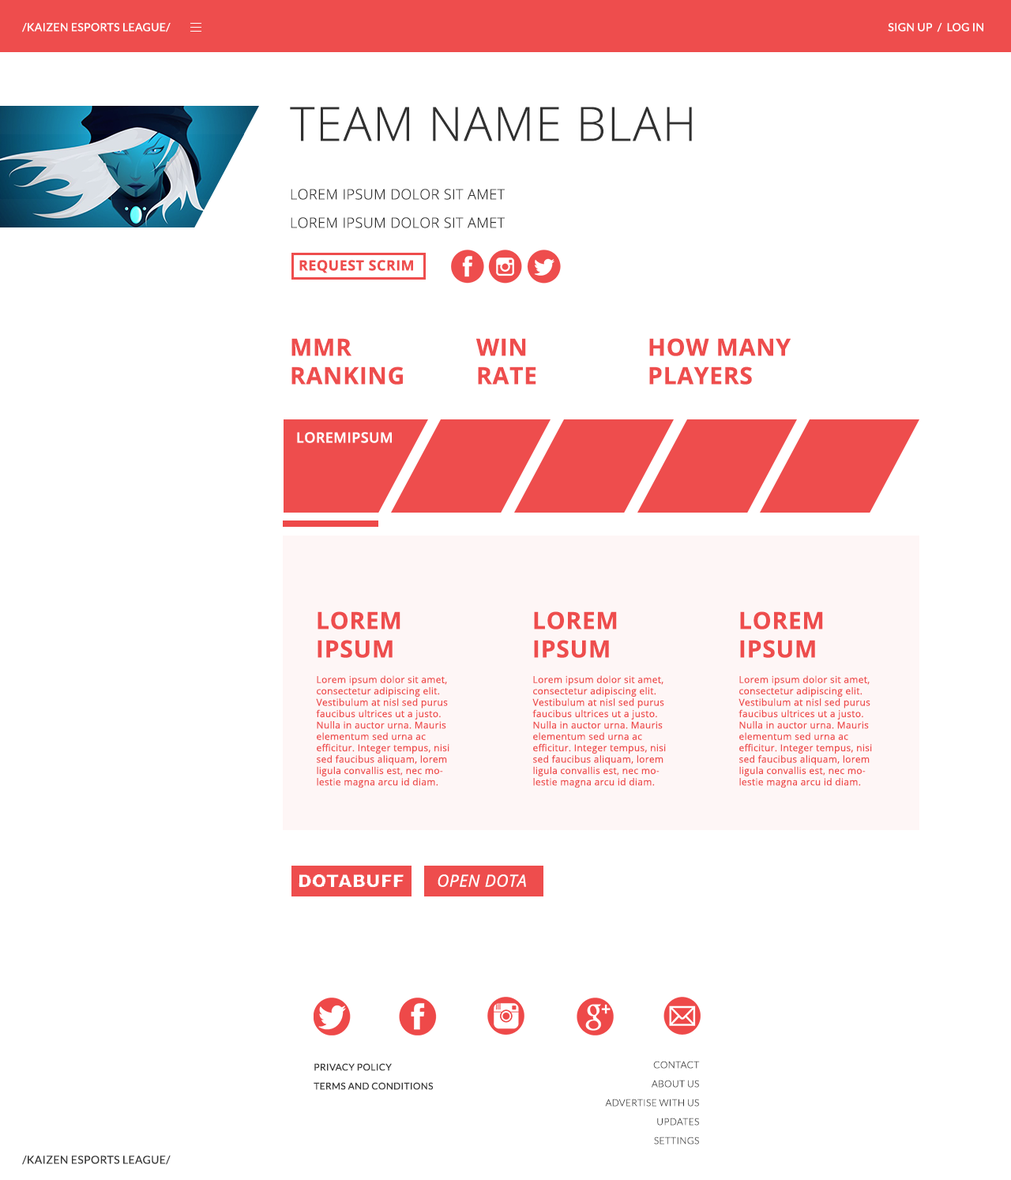
<style>
.page{position:relative;width:1011px;height:1180px;background:#ffffff}
.page>*{position:absolute;margin:0}
.t1{font:11.1px "Lato-Regular";letter-spacing:0.025em;color:#ffffff;text-transform:uppercase}
.t2{font:47.4px "OpenSans-Light";letter-spacing:0.025em;color:#303030}
.t3{font:14.2px "OpenSans-Light";letter-spacing:0.025em;color:#303030}
.t4{font:14.2px "OpenSans-Bold";letter-spacing:0.025em;color:#ee4d4d}
.t5{font:23.7px "OpenSans-Bold";letter-spacing:0.025em;color:#ee4d4d}
.t6{font:14.2px "OpenSans-Semibold";letter-spacing:0.025em;color:#ffffff}
.t7{font:9.5px "OpenSans";letter-spacing:0.025em;color:#ee4d4d}
.t8{font:16.6px "OpenSans-Italic";letter-spacing:0.025em;color:#ffffff}
.t9{font:9.5px/19px "Lato-Light";letter-spacing:0.025em;color:#383838;text-transform:uppercase}
.t10{font:9.5px/19px "Lato-Regular";letter-spacing:0.025em;color:#383838;text-transform:uppercase}
.t11{font:11.1px "Lato-Regular";letter-spacing:0.025em;color:#383838;text-transform:uppercase}
</style>
<div class="page">
<p class="t1" style="left:22px;top:23px;width:149px;height:9px">/KAIZEN ESPORTS LEAGUE/</p>
<p class="t1" style="left:888px;top:23px;width:95px;height:9px">SIGN UP  /  LOG IN</p>
<p class="t2" style="left:290px;top:107px;width:402px;height:34px">TEAM NAME BLAH</p>
<p class="t3" style="left:291px;top:189px;width:214px;height:11px">LOREM IPSUM DOLOR SIT AMET</p>
<p class="t3" style="left:291px;top:217px;width:214px;height:11px">LOREM IPSUM DOLOR SIT AMET</p>
<p class="t4" style="left:299px;top:260px;width:114px;height:13px">REQUEST SCRIM</p>
<p class="t5" style="left:291px;top:338px;width:112px;height:47px">MMR<br>RANKING</p>
<p class="t5" style="left:476px;top:338px;width:60px;height:47px">WIN<br>RATE</p>
<p class="t5" style="left:649px;top:338px;width:141px;height:47px">HOW MANY<br>PLAYERS</p>
<p class="t6" style="left:297px;top:432px;width:95px;height:11px">LOREMIPSUM</p>
<p class="t5" style="left:317px;top:611px;width:83px;height:47px">LOREM<br>IPSUM</p>
<p class="t5" style="left:534px;top:611px;width:83px;height:47px">LOREM<br>IPSUM</p>
<p class="t5" style="left:740px;top:611px;width:83px;height:47px">LOREM<br>IPSUM</p>
<p class="t7" style="left:316px;top:675px;width:133px;height:113px">Lorem ipsum dolor sit amet, consectetur adipiscing elit. Vestibulum at nisl sed purus faucibus ultrices ut a justo. Nulla in auctor urna. Mauris elementum sed urna ac efficitur. Integer tempus, nisi sed faucibus aliquam, lorem ligula convallis est, nec molestie magna arcu id diam.</p>
<p class="t7" style="left:532px;top:675px;width:134px;height:113px">Lorem ipsum dolor sit amet, consectetur adipiscing elit. Vestibulum at nisl sed purus faucibus ultrices ut a justo. Nulla in auctor urna. Mauris elementum sed urna ac efficitur. Integer tempus, nisi sed faucibus aliquam, lorem ligula convallis est, nec molestie magna arcu id diam.</p>
<p class="t7" style="left:738px;top:675px;width:134px;height:113px">Lorem ipsum dolor sit amet, consectetur adipiscing elit. Vestibulum at nisl sed purus faucibus ultrices ut a justo. Nulla in auctor urna. Mauris elementum sed urna ac efficitur. Integer tempus, nisi sed faucibus aliquam, lorem ligula convallis est, nec molestie magna arcu id diam.</p>
<p class="t8" style="left:437px;top:874px;width:89px;height:13px">OPEN DOTA</p>
<p class="t9" style="left:605px;top:1061px;width:95px;height:83px;text-align:right">Contact<br>ABOUT US<br>Advertise With Us<br>UPDATES<br>SETTINGS</p>
<p class="t10" style="left:313px;top:1063px;width:121px;height:27px">Privacy policy<br>Terms and conditions</p>
<p class="t11" style="left:22px;top:1155px;width:149px;height:10px">/KAIZEN ESPORTS LEAGUE/</p>
</div>
